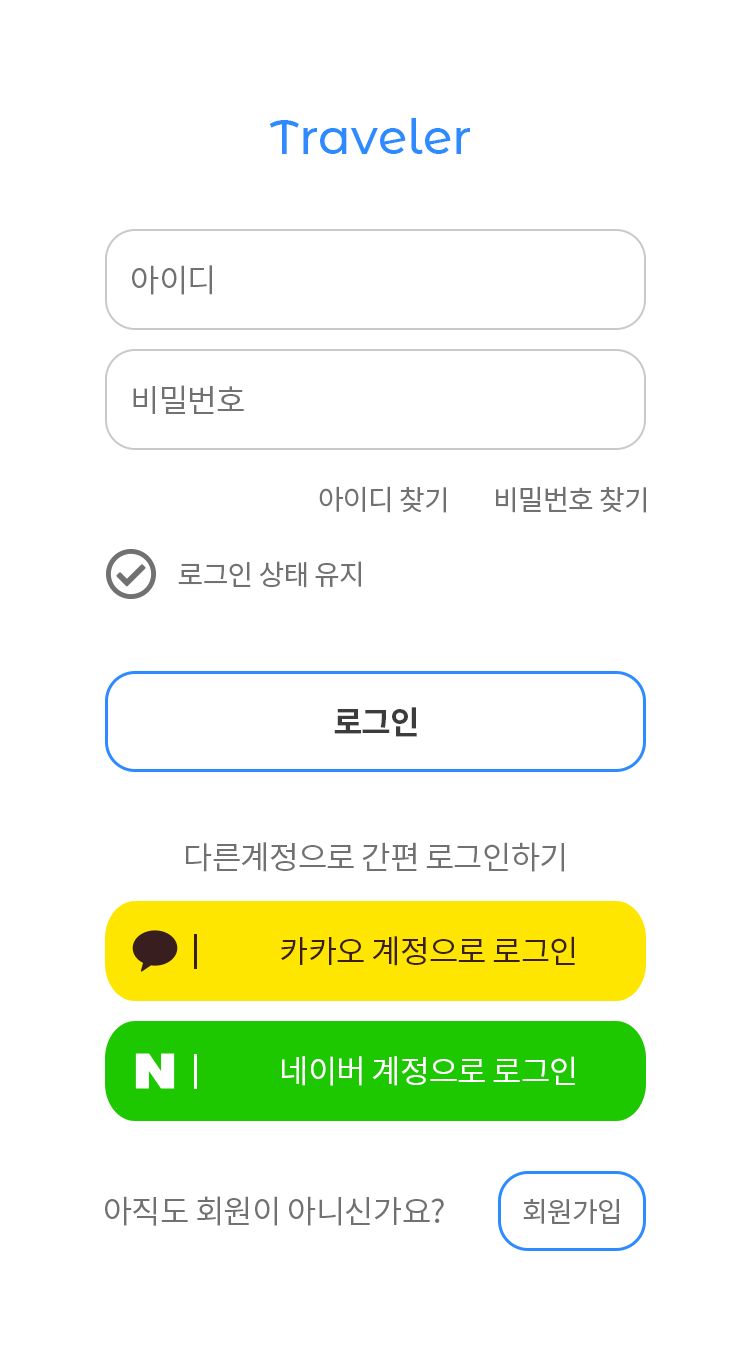
<style>
.page{position:relative;width:750px;height:1351px;background:#ffffff}
.page>*{position:absolute;margin:0}
.t1{font:48px "MontserratAlternates-Medium";color:#2e8bff}
.t2{font:32px "NotoSansKR-Regular";letter-spacing:-0.025em;color:#717171}
.t3{font:28px "NotoSansKR-Regular";letter-spacing:-0.025em;color:#717171}
.t4{font:32px "NotoSansKR-Bold";letter-spacing:-0.025em;color:#3c3c3c}
.t5{font:32px "NotoSansKR-Regular";letter-spacing:-0.025em;color:#381e1e}
.t6{font:32px "NotoSansKR-Regular";letter-spacing:-0.025em;color:#ffffff}
</style>
<div class="page">
<p class="t1" style="left:269px;top:118px;width:201px;height:36px">Traveler</p>
<p class="t2" style="left:132px;top:265px;width:80px;height:30px">아이디</p>
<p class="t2" style="left:133px;top:385px;width:111px;height:29px">비밀번호</p>
<p class="t3" style="left:319px;top:486px;width:127px;height:27px">아이디 찾기</p>
<p class="t3" style="left:496px;top:486px;width:150px;height:27px">비밀번호 찾기</p>
<p class="t3" style="left:178px;top:561px;width:183px;height:27px">로그인 상태 유지</p>
<p class="t4" style="left:334px;top:707px;width:83px;height:30px">로그인</p>
<p class="t2" style="left:186px;top:842px;width:378px;height:30px">다른계정으로 간편 로그인하기</p>
<p class="t5" style="left:281px;top:936px;width:294px;height:30px">카카오 계정으로 로그인</p>
<p class="t6" style="left:282px;top:1056px;width:293px;height:30px">네이버 계정으로 로그인</p>
<p class="t2" style="left:105px;top:1196px;width:339px;height:30px">아직도 회원이 아니신가요?</p>
<p class="t3" style="left:523px;top:1198px;width:96px;height:27px">회원가입</p>
</div>
